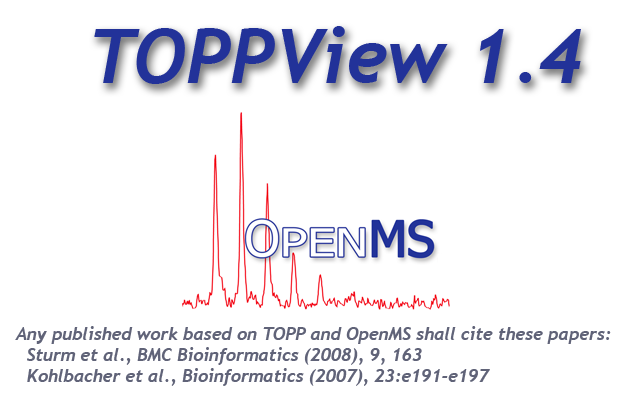
<style>
.page{position:relative;width:640px;height:400px;background:#ffffff}
.page>*{position:absolute;margin:0}
.t1{font:75px "Trebuchet-BoldItalic";color:#223299}
.t2{font:17.5px "Trebuchet-BoldItalic";color:#606378}
</style>
<div class="page">
<p class="t1" style="left:94px;top:26px;width:487px;height:58px">TOPPView 1.4</p>
<p class="t2" style="left:15px;top:326px;width:596px;height:60px">Any published work based on TOPP and OpenMS shall cite these papers:<br>  Sturm et al., BMC Bioinformatics (2008), 9, 163<br>  Kohlbacher et al., Bioinformatics (2007), 23:e191-e197</p>
</div>
